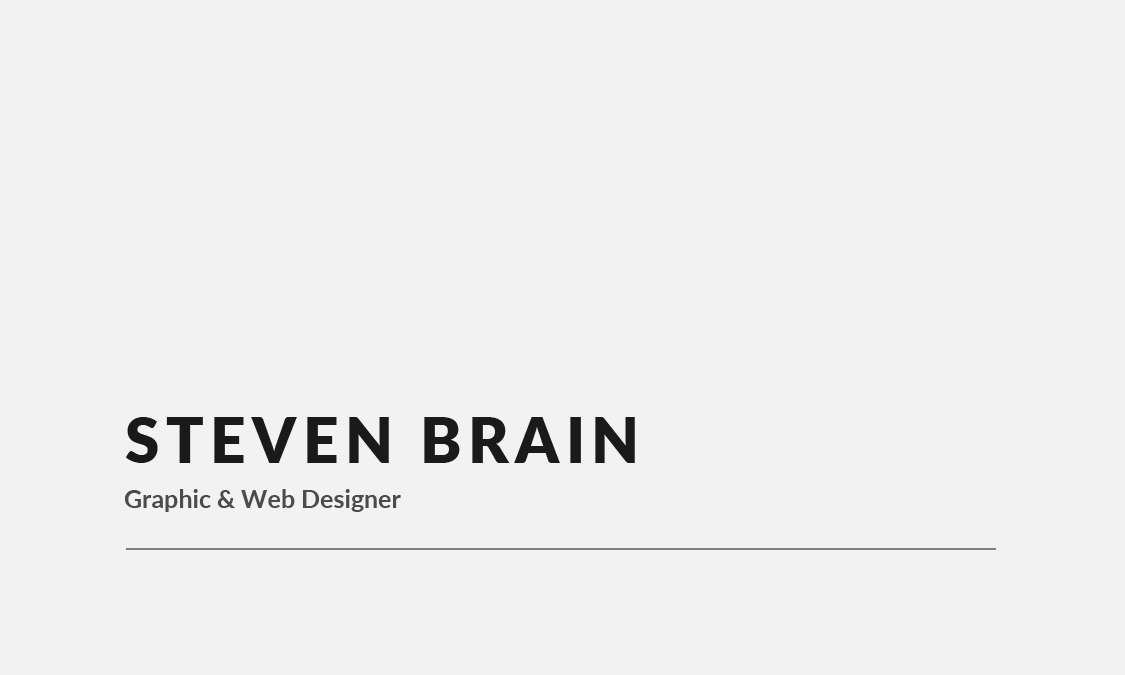
<style>
.page{position:relative;width:1125px;height:675px;background:#f2f2f2}
.page>*{position:absolute;margin:0}
.t1{font:62.5px "Lato-Black";letter-spacing:0.1em;color:#1a1a1a;text-transform:uppercase}
.t2{font:25px "Lato-Bold";color:#4c4c4c}
</style>
<div class="page">
<p class="t1" style="left:125px;top:417px;width:510px;height:46px">STEVEN BRAIN</p>
<p class="t2" style="left:124px;top:489px;width:277px;height:23px">Graphic &amp; Web Designer</p>
</div>
